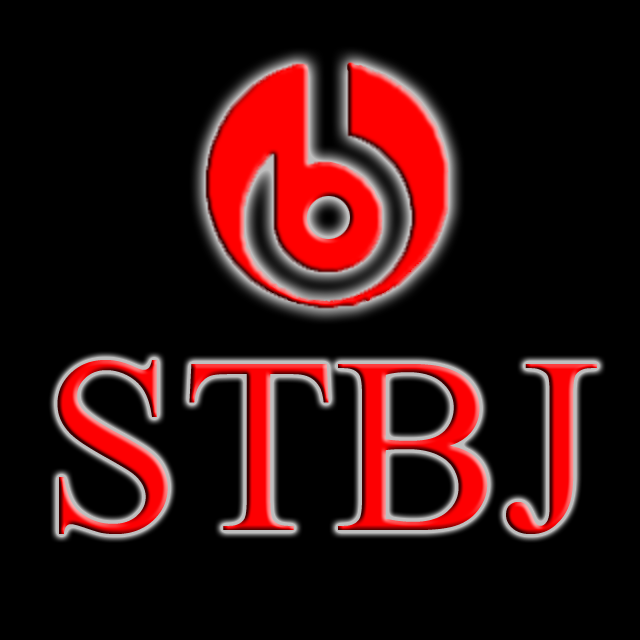
<style>
.page{position:relative;width:640px;height:640px;background:#000000}
.page>*{position:absolute;margin:0}
.t1{font:250px "TimesNewRomanPSMT"}
</style>
<div class="page">
<p class="t1" style="left:57px;top:360px;width:540px;height:174px">STBJ</p>
</div>
